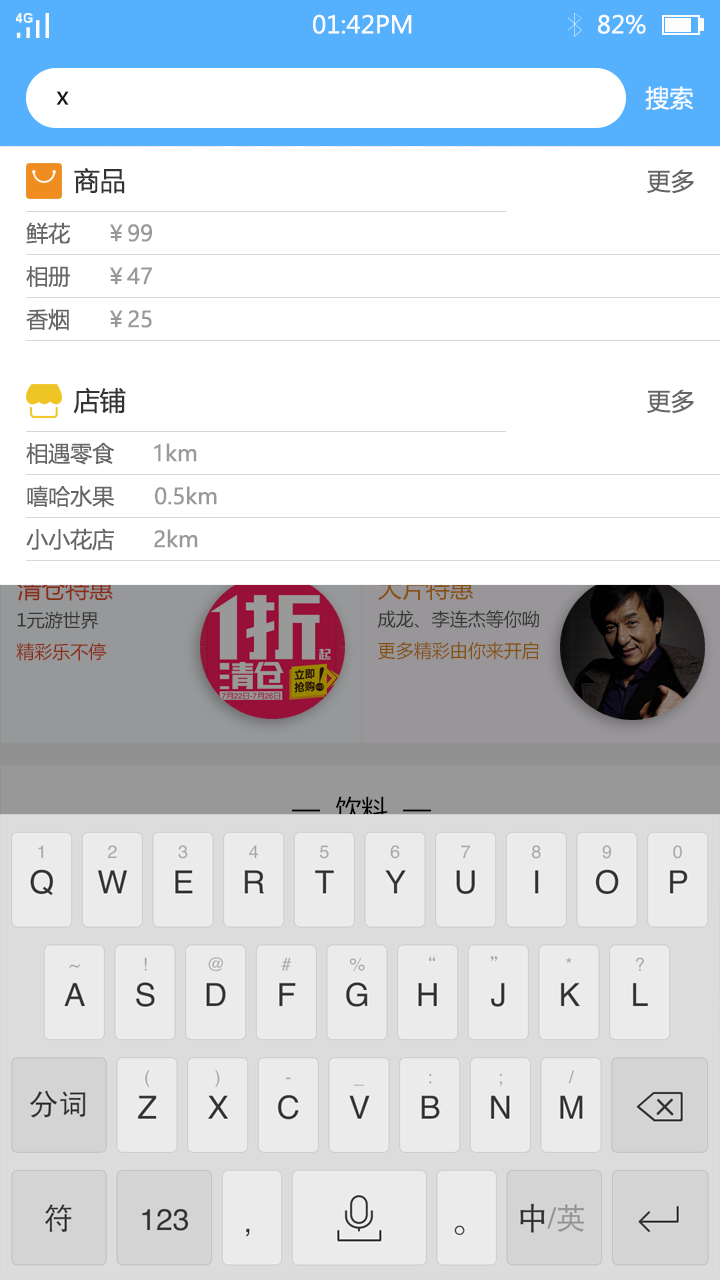
<style>
.page{position:relative;width:720px;height:1280px;background:#ffffff}
.page>*{position:absolute;margin:0}
.t1{font:24px "MicrosoftYaHei";color:#fbfdfc}
.t2{font:24px "MicrosoftYaHei";color:#ffffff}
.t3{font:24px "MicrosoftYaHei";color:#000000}
.t4{font:26px "MicrosoftYaHei";color:#333333}
.t5{font:24px "MicrosoftYaHei";color:#666666}
.t6{font:22px "MicrosoftYaHei";color:#666666}
.t7{font:22px "MicrosoftYaHei";color:#999999}
.t8{font:24px "MicrosoftYaHei"}
.t9{font:18px "MicrosoftYaHei"}
.t10{font:26px "MicrosoftYaHei";color:#000000}
</style>
<div class="page">
<p class="t1" style="left:313px;top:14px;width:99px;height:20px">01:42PM</p>
<p class="t1" style="left:598px;top:14px;width:48px;height:20px">82%</p>
<p class="t2" style="left:645px;top:86px;width:49px;height:24px;opacity:0.96">搜索</p>
<p class="t3" style="left:56px;top:91px;width:13px;height:14px;opacity:0.96">x</p>
<p class="t4" style="left:74px;top:167px;width:51px;height:27px">商品</p>
<p class="t5" style="left:647px;top:169px;width:47px;height:25px">更多</p>
<p class="t6" style="left:26px;top:222px;width:44px;height:22px">鲜花</p>
<p class="t7" style="left:110px;top:224px;width:42px;height:18px">￥99</p>
<p class="t6" style="left:26px;top:266px;width:44px;height:22px">相册</p>
<p class="t7" style="left:110px;top:267px;width:42px;height:18px">￥47</p>
<p class="t6" style="left:26px;top:308px;width:43px;height:23px">香烟</p>
<p class="t7" style="left:110px;top:310px;width:42px;height:18px">￥25</p>
<p class="t4" style="left:73px;top:387px;width:53px;height:27px">店铺</p>
<p class="t5" style="left:647px;top:389px;width:47px;height:25px">更多</p>
<p class="t6" style="left:26px;top:442px;width:88px;height:23px">相遇零食</p>
<p class="t7" style="left:154px;top:443px;width:43px;height:19px">1km</p>
<p class="t6" style="left:27px;top:485px;width:87px;height:23px">嘻哈水果</p>
<p class="t7" style="left:155px;top:486px;width:62px;height:19px">0.5km</p>
<p class="t6" style="left:26px;top:528px;width:88px;height:23px">小小花店</p>
<p class="t7" style="left:154px;top:529px;width:44px;height:19px">2km</p>
<p class="t8" style="left:17px;top:577px;width:96px;height:24px">清仓特惠</p>
<p class="t8" style="left:378px;top:577px;width:96px;height:24px">大片特惠</p>
<p class="t9" style="left:16px;top:611px;width:90px;height:50px">1元游世界<br>精彩乐不停</p>
<p class="t9" style="left:377px;top:610px;width:162px;height:50px">成龙、李连杰等你呦<br>更多精彩由你来开启</p>
<p class="t10" style="left:292px;top:796px;width:139px;height:26px">—  饮料  —</p>
</div>
